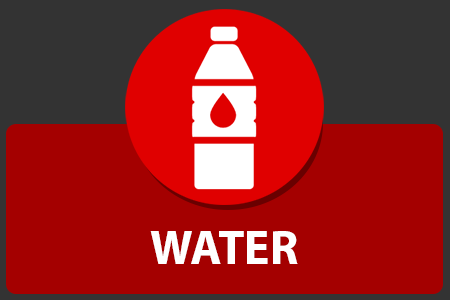
<style>
.page{position:relative;width:450px;height:300px;background:#a40000}
.page>*{position:absolute;margin:0}
.t1{font:48px "MyriadPro-Bold";color:#ffffff}
</style>
<div class="page">
<p class="t1" style="left:150px;top:231px;width:148px;height:33px">WATER</p>
</div>
